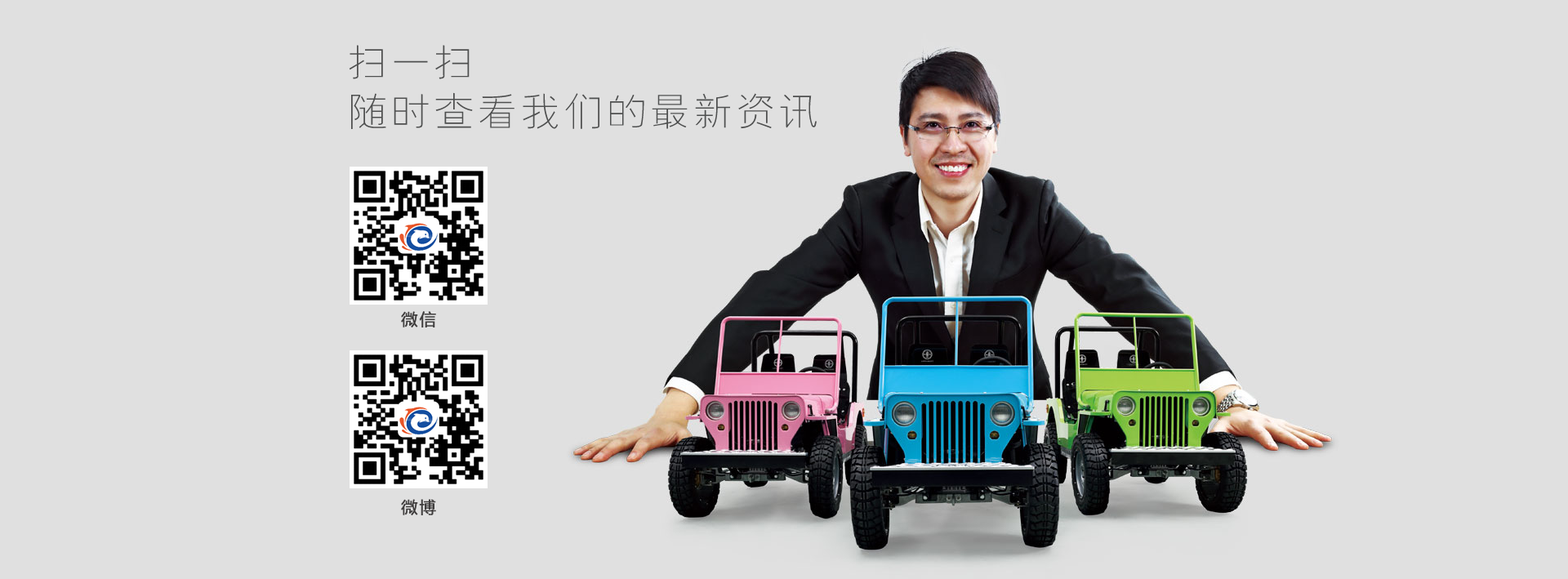
<style>
.page{position:relative;width:1568px;height:579px;background:#e0e0e0}
.page>*{position:absolute;margin:0}
.t1{font:39.2px/49px "FZYXJW--GB1-0";letter-spacing:0.1em;color:#4e4f4f}
.t2{font:16.3px "MicrosoftYaHei";letter-spacing:0.1em;color:#3f3d3d;font-weight:bold}
</style>
<div class="page">
<p class="t1" style="left:349px;top:45px;width:468px;height:84px">扫一扫 <br>随时查看我们的最新资讯</p>
<p class="t2" style="left:401px;top:311px;width:35px;height:16px">微信</p>
<p class="t2" style="left:401px;top:499px;width:35px;height:16px">微博</p>
</div>
